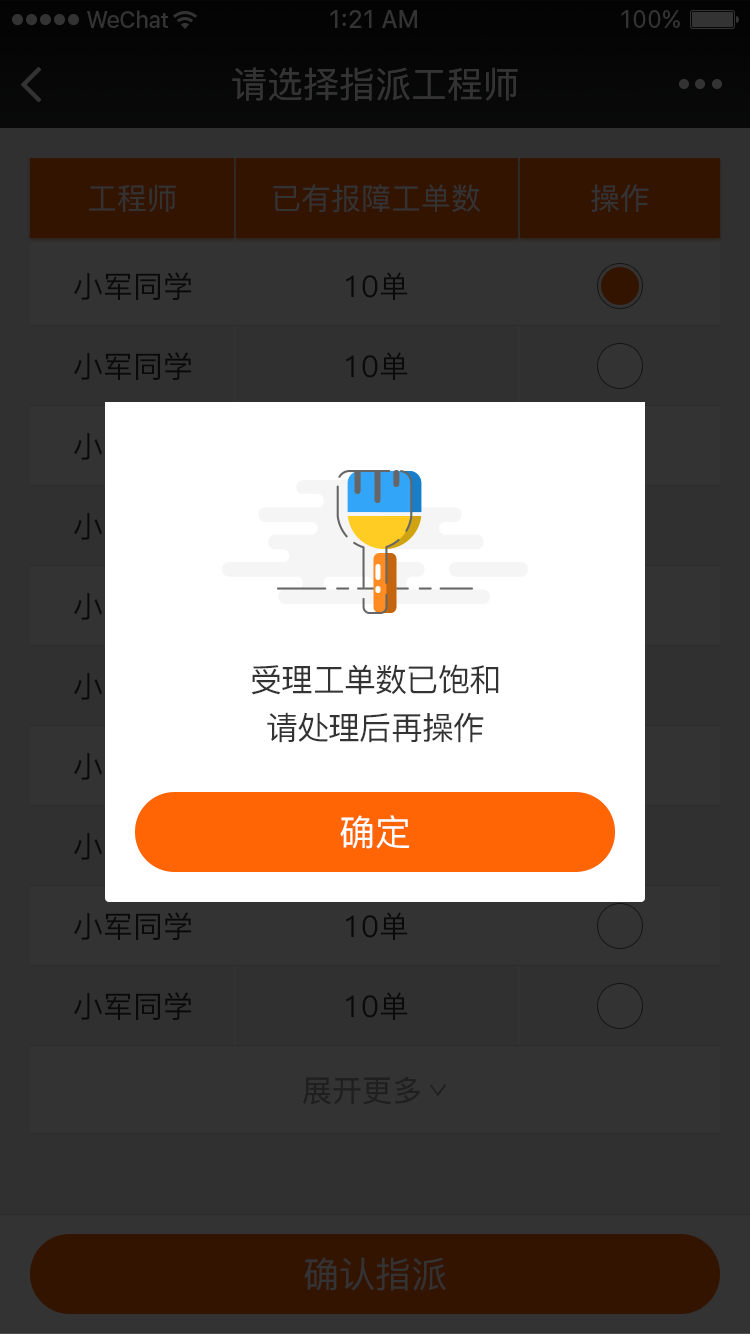
<style>
.page{position:relative;width:750px;height:1334px;background:#303030}
.page>*{position:absolute;margin:0}
.t1{font:36px "PingFang-SC-Medium";color:#333333}
.t2{font:30px "PingFang-SC-Medium";color:#333333}
.t3{font:30px "PingFang-SC-Medium";color:#0a0a0a}
.t4{font:32px/48px "PingFang-SC-Medium";letter-spacing:-0.025em;color:#333333}
.t5{font:36px "PingFang-SC-Medium";color:#ffffff}
.t6{font:30px "PingFang-SC-Medium";color:#1f1f1f}
</style>
<div class="page">
<p class="t1" style="left:232px;top:67px;width:286px;height:34px">请选择指派工程师</p>
<p class="t2" style="left:89px;top:184px;width:87px;height:28px">工程师</p>
<p class="t2" style="left:273px;top:184px;width:207px;height:28px">已有报障工单数</p>
<p class="t2" style="left:591px;top:184px;width:58px;height:28px">操作</p>
<p class="t3" style="left:74px;top:272px;width:117px;height:28px">小军同学</p>
<p class="t3" style="left:346px;top:272px;width:62px;height:28px">10单</p>
<p class="t3" style="left:74px;top:352px;width:117px;height:28px">小军同学</p>
<p class="t3" style="left:346px;top:352px;width:62px;height:28px">10单</p>
<p class="t4" style="left:251px;top:664px;width:248px;height:79px;text-align:center">受理工单数已饱和<br>请处理后再操作</p>
<p class="t5" style="left:340px;top:815px;width:70px;height:34px">确定</p>
<p class="t3" style="left:74px;top:912px;width:117px;height:28px">小军同学</p>
<p class="t3" style="left:346px;top:912px;width:62px;height:28px">10单</p>
<p class="t3" style="left:74px;top:992px;width:117px;height:28px">小军同学</p>
<p class="t3" style="left:346px;top:992px;width:62px;height:28px">10单</p>
<p class="t6" style="left:303px;top:1076px;width:117px;height:29px">展开更多</p>
<p class="t1" style="left:304px;top:1257px;width:142px;height:34px">确认指派</p>
</div>
